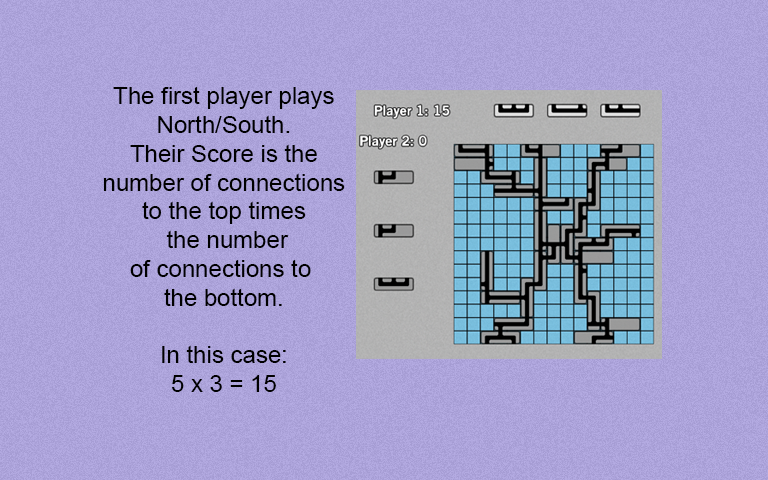
<style>
.page{position:relative;width:768px;height:480px}
.page>*{position:absolute;margin:0}
.t1{font:24px "ArialMT";color:#000000}
</style>
<div class="page">
<p class="t1" style="left:103px;top:86px;width:242px;height:306px;text-align:center">The first player plays<br>North/South.<br>Their Score is the<br> number of connections <br>to the top times<br> the number<br>of connections to <br>the bottom.<br><br>In this case:<br>5 x 3 = 15</p>
</div>
